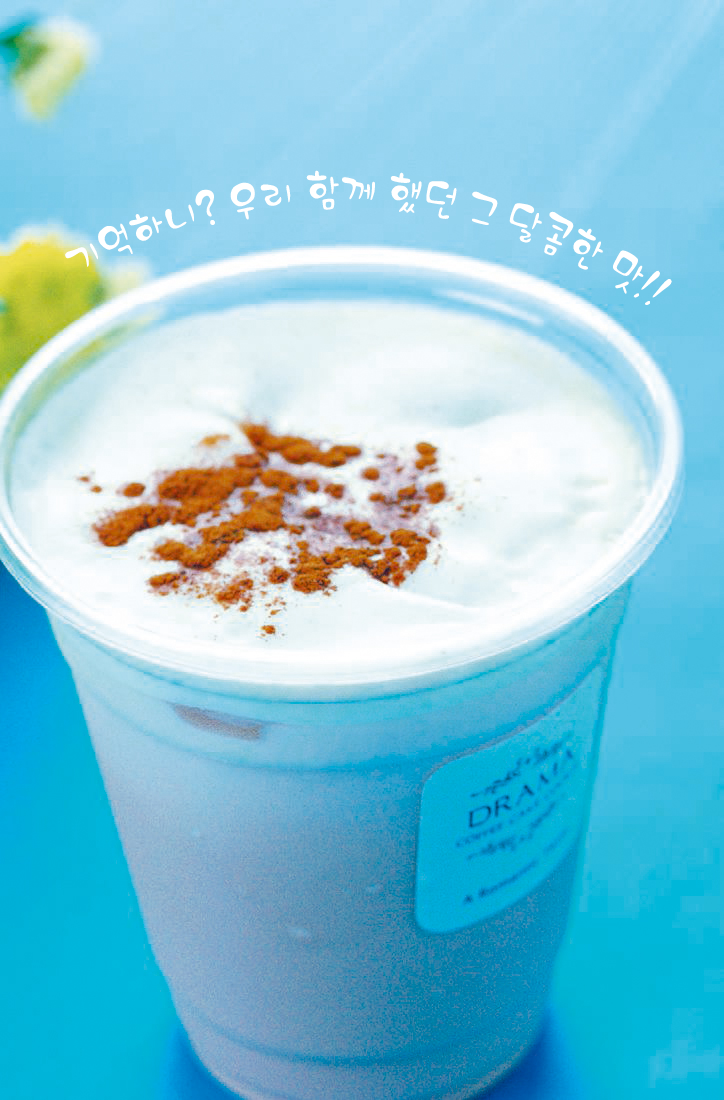
<style>
.page{position:relative;width:724px;height:1100px}
.page>*{position:absolute;margin:0}
.t1{font:45px "HUMongsil162";color:#ffffff}
</style>
<div class="page">
<p class="t1" style="left:65px;top:170px;width:607px;height:135px">기억하니? 우리 함께 했던 그 달콤한 맛!!</p>
</div>
